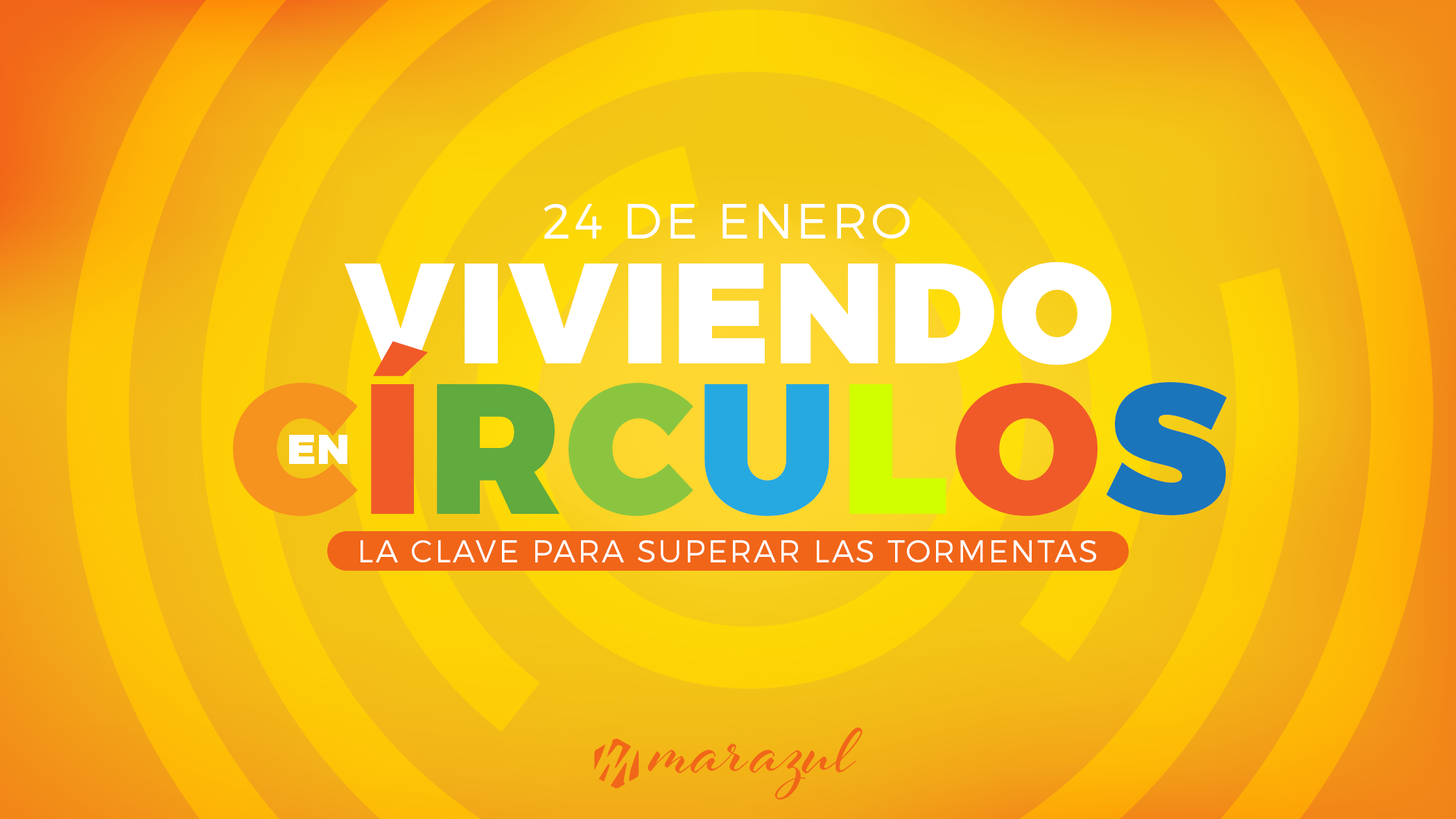
<style>
.page{position:relative;width:1456px;height:819px}
.page>*{position:absolute;margin:0}
.t1{font:49.9px "Montserrat-Light";letter-spacing:0.065em;color:#ffffff;text-transform:uppercase}
.t2{font:142.6px "Montserrat-Black";letter-spacing:0.025em;color:#ffffff;text-transform:uppercase}
.t3{font:184.5px "Montserrat-Black";letter-spacing:0.025em;color:#f6921e;text-transform:uppercase}
.t4{font:184.5px "Montserrat-Black";letter-spacing:0.025em;color:#f05a28;text-transform:uppercase}
.t5{font:184.5px "Montserrat-Black";letter-spacing:0.025em;color:#60aa3e;text-transform:uppercase}
.t6{font:184.5px "Montserrat-Black";letter-spacing:0.025em;color:#8bc53f;text-transform:uppercase}
.t7{font:184.5px "Montserrat-Black";letter-spacing:0.025em;color:#26a9e0;text-transform:uppercase}
.t8{font:184.5px "Montserrat-Black";letter-spacing:0.025em;color:#d2ff00;text-transform:uppercase}
.t9{font:184.5px "Montserrat-Black";letter-spacing:0.025em;color:#1b75bb;text-transform:uppercase}
.t10{font:41.9px "Montserrat-Black";letter-spacing:0.025em;color:#ffffff;text-transform:uppercase}
.t11{font:31.2px "Montserrat-Light";letter-spacing:0.065em;color:#ffffff}
</style>
<div class="page">
<p class="t1" style="left:544px;top:204px;width:366px;height:35px">24 de enero</p>
<p class="t2" style="left:345px;top:261px;width:767px;height:104px">Viviendo</p>
<p class="t3" style="left:233px;top:341px;width:994px;height:175px">C<span class="t4">Í</span><span class="t5">R</span><span class="t6">C</span><span class="t7">U</span><span class="t8">L</span><span class="t4">O</span><span class="t9">S</span></p>
<p class="t10" style="left:289px;top:435px;width:58px;height:29px">en</p>
<p class="t11" style="left:361px;top:540px;width:735px;height:22px">LA CLAVE PARA SUPERAR LAS TORMENTAS</p>
</div>
